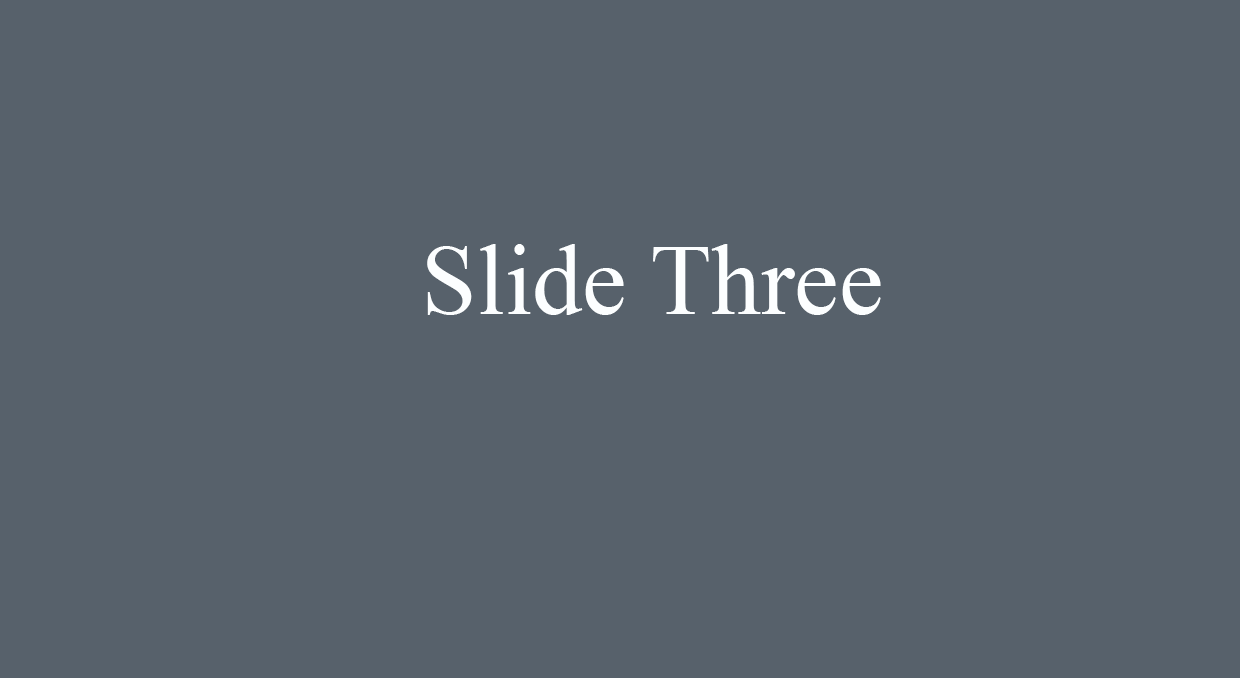
<style>
.page{position:relative;width:1240px;height:678px;background:#57616b}
.page>*{position:absolute;margin:0}
.t1{font:100px "TimesNewRomanPSMT";color:#fcfeff}
</style>
<div class="page">
<p class="t1" style="left:427px;top:244px;width:454px;height:71px">Slide Three</p>
</div>
